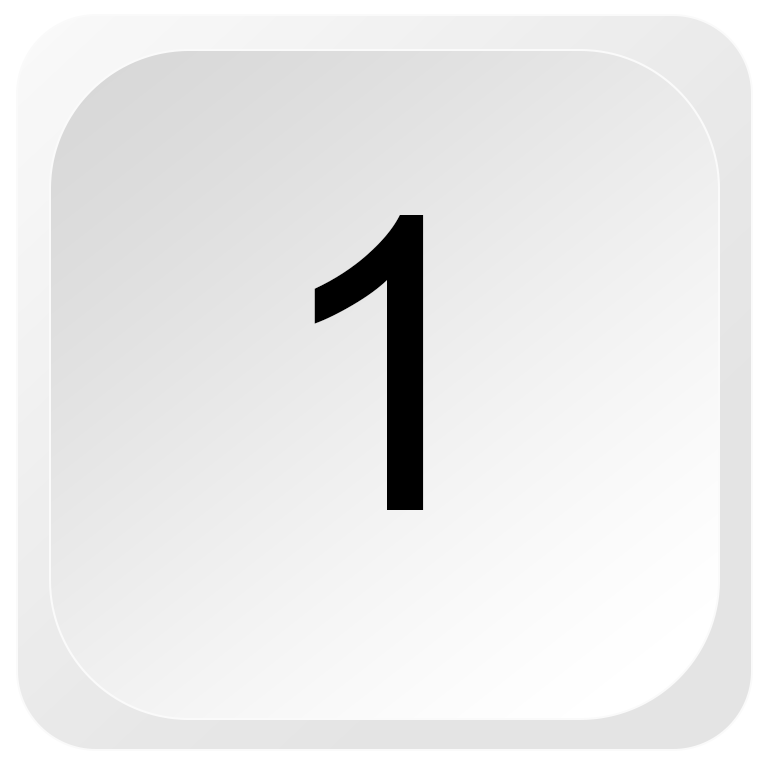
<style>
.page{position:relative;width:768px;height:768px}
.page>*{position:absolute;margin:0}
.t1{font:411px "ArialMT";color:#000000}
</style>
<div class="page">
<p class="t1" style="left:314px;top:215px;width:110px;height:295px">1</p>
</div>
